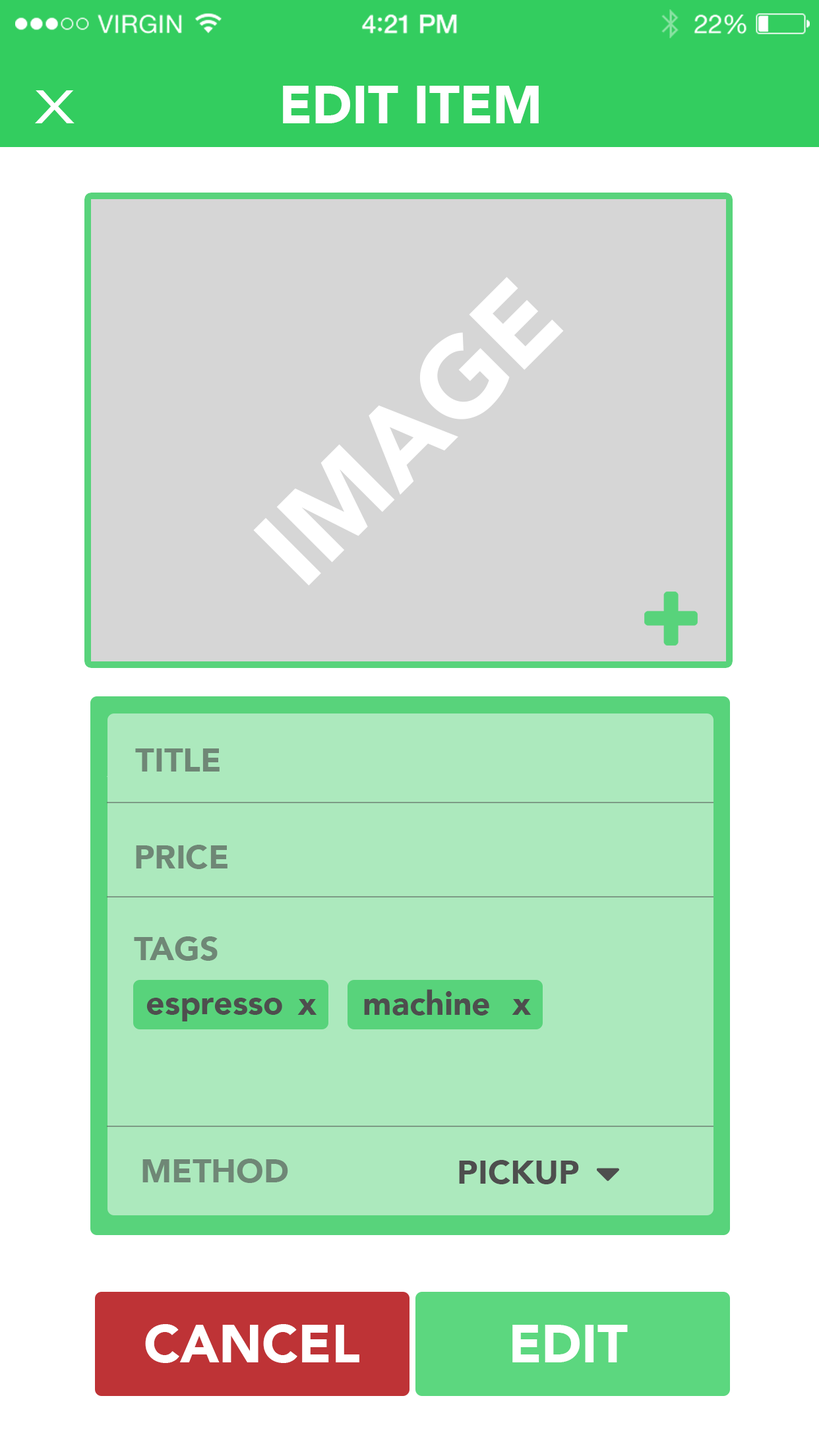
<style>
.page{position:relative;width:819px;height:1456px;background:#ffffff}
.page>*{position:absolute;margin:0}
.t1{font:52.8px "Avenir-Black";color:#ffffff}
.t2{font:110.2px "Avenir-Black";color:#ffffff}
.t3{font:33px "Avenir-Black";color:#6f8776}
.t4{font:33px "Avenir-Black";color:#4e4e4e}
</style>
<div class="page">
<p class="t1" style="left:283px;top:86px;width:256px;height:37px">EDIT ITEM</p>
<p class="t2" style="left:253px;top:277px;width:311px;height:309px;rotate:-45deg">IMAGE</p>
<p class="t3" style="left:135px;top:748px;width:85px;height:24px">TITLE</p>
<p class="t3" style="left:136px;top:845px;width:91px;height:24px">PRICE</p>
<p class="t3" style="left:134px;top:936px;width:84px;height:25px">TAGS</p>
<p class="t4" style="left:364px;top:989px;width:125px;height:26px">machine</p>
<p class="t4" style="left:146px;top:998px;width:136px;height:23px">espresso</p>
<p class="t4" style="left:297px;top:999px;width:20px;height:16px">x</p>
<p class="t4" style="left:512px;top:999px;width:19px;height:16px">x</p>
<p class="t3" style="left:142px;top:1159px;width:146px;height:24px">METHOD</p>
<p class="t4" style="left:459px;top:1160px;width:120px;height:24px">PICKUP</p>
<p class="t1" style="left:145px;top:1324px;width:214px;height:39px">CANCEL</p>
<p class="t1" style="left:512px;top:1325px;width:116px;height:37px">EDIT</p>
</div>
